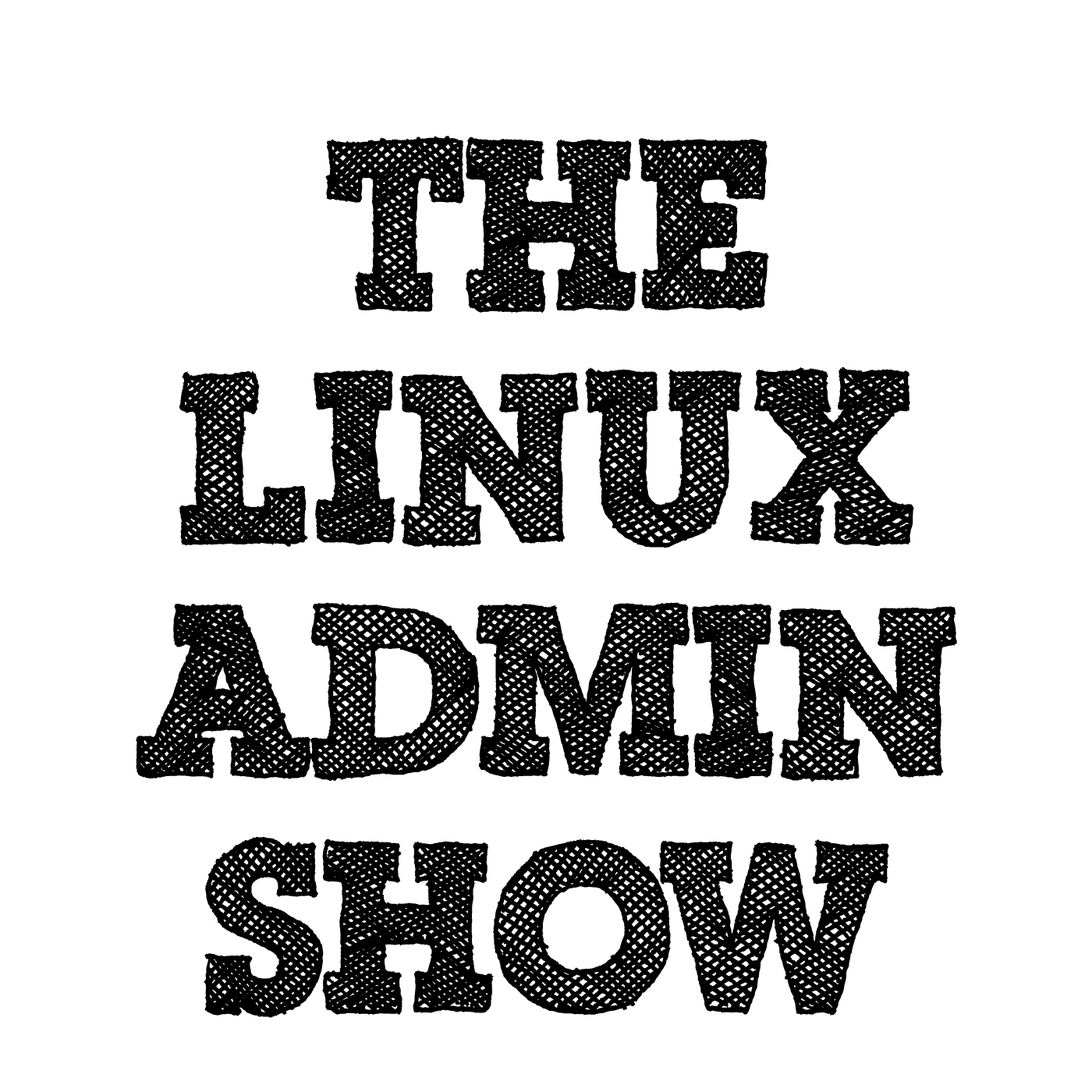
<style>
.page{position:relative;width:1092px;height:1092px;background:#ffffff}
.page>*{position:absolute;margin:0}
.t1{font:234px "ScribbleBoxDEMO";color:#000000}
</style>
<div class="page">
<p class="t1" style="left:325px;top:136px;width:444px;height:177px">THE</p>
<p class="t1" style="left:179px;top:367px;width:735px;height:181px">Linux</p>
<p class="t1" style="left:136px;top:602px;width:821px;height:180px">ADMIN</p>
<p class="t1" style="left:204px;top:836px;width:685px;height:182px">SHOW</p>
</div>
